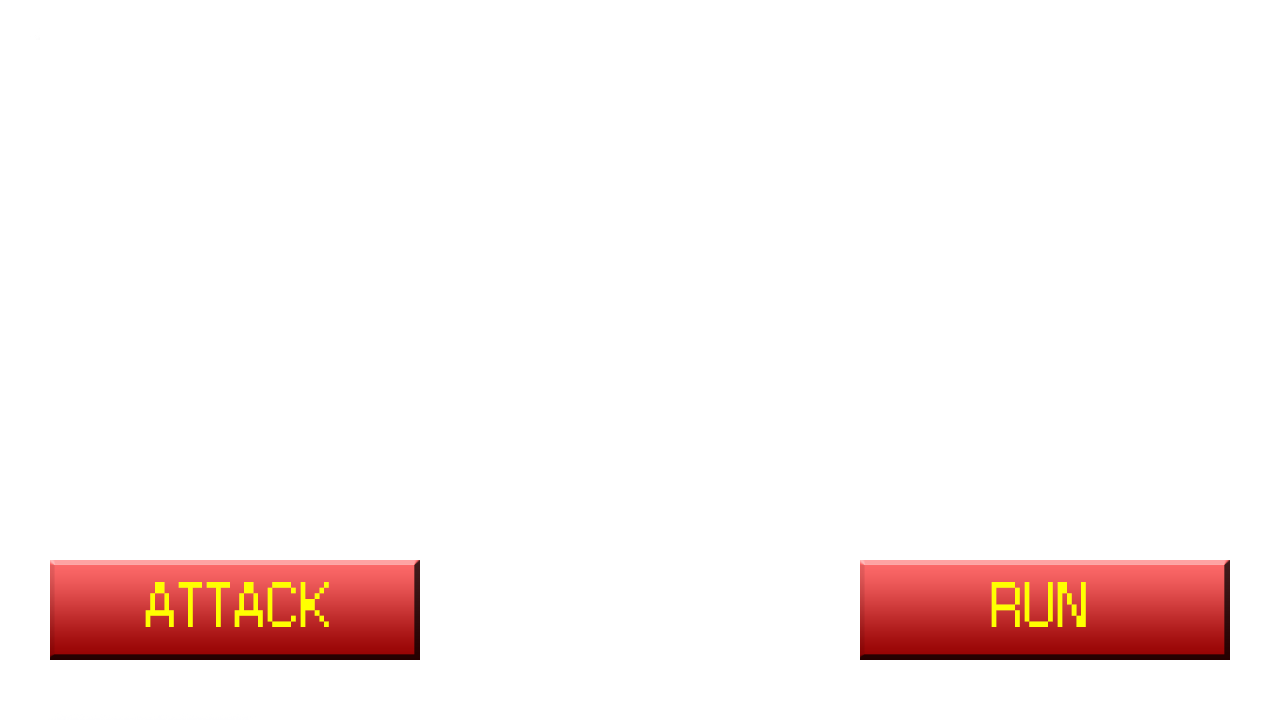
<style>
.page{position:relative;width:1280px;height:720px;background:#ffffff}
.page>*{position:absolute;margin:0}
.t1{font:60px "Small Fonts";color:#ffff00}
</style>
<div class="page">
<p class="t1" style="left:145px;top:582px;width:184px;height:45px">ATTACK</p>
<p class="t1" style="left:991px;top:582px;width:95px;height:45px">RUN</p>
</div>
